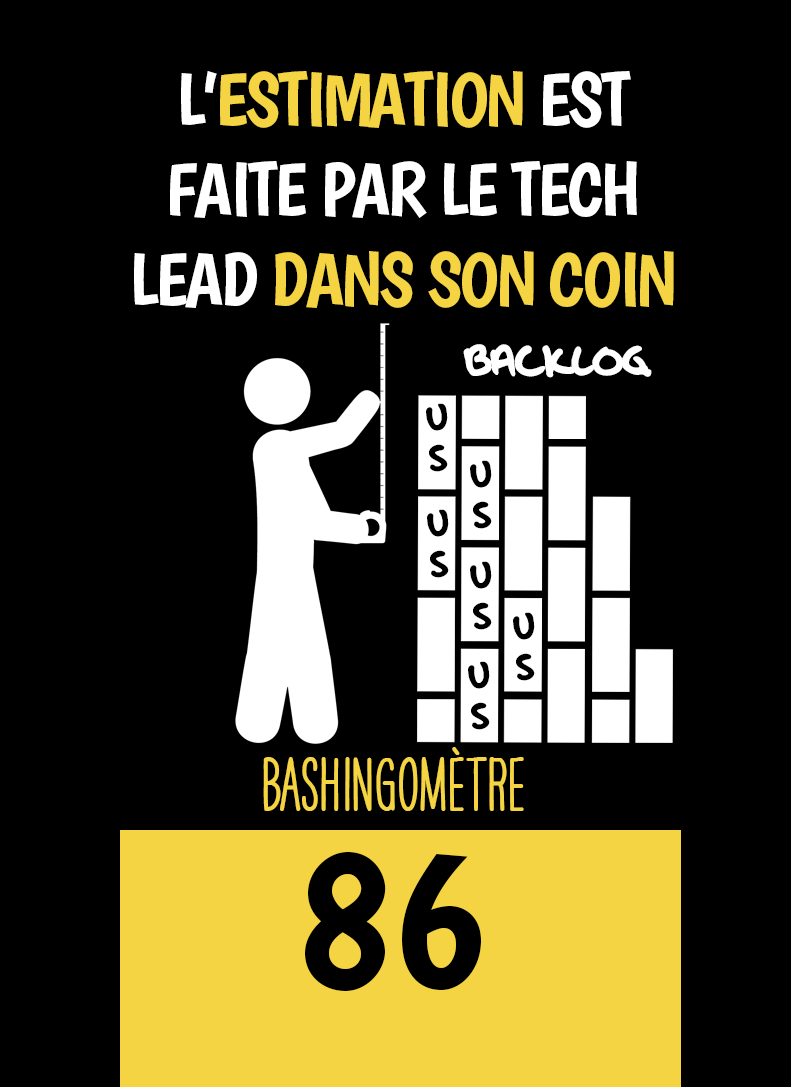
<style>
.page{position:relative;width:791px;height:1087px;background:#000000}
.page>*{position:absolute;margin:0}
.t1{font:75px "Boogaloo-Regular";letter-spacing:-0.04em;color:#ffffff}
.t2{font:75px "Boogaloo-Regular";letter-spacing:-0.04em;color:#f4d443}
.t3{font:50px "OakStreetW01-Regular";letter-spacing:-0.04em;color:#ffffff}
.t4{font:41.7px/40px "OakStreetW01-Regular";letter-spacing:-0.04em;color:#000000}
.t5{font:66.7px "HAVEANICEDAYTallW04-Bold";color:#f4d443}
.t6{font:200px "Boogaloo-Regular";color:#000000}
</style>
<div class="page">
<p class="t1" style="left:134px;top:71px;width:540px;height:237px;text-align:center">L’<span class="t2">ESTIMATION</span> EST FAITE PAR LE TECH LEAD <span class="t2">DANS SON COIN</span></p>
<p class="t3" style="left:463px;top:344px;width:189px;height:34px">BACKLOG</p>
<p class="t4" style="left:426px;top:403px;width:22px;height:69px;text-align:center">U<br>S</p>
<p class="t4" style="left:470px;top:460px;width:22px;height:69px;text-align:center">U<br>S</p>
<p class="t4" style="left:427px;top:509px;width:22px;height:69px;text-align:center">U<br>S</p>
<p class="t4" style="left:470px;top:561px;width:22px;height:69px;text-align:center">U<br>S</p>
<p class="t4" style="left:513px;top:612px;width:22px;height:69px;text-align:center">U<br>S</p>
<p class="t4" style="left:468px;top:661px;width:22px;height:69px;text-align:center">U<br>S</p>
<p class="t5" style="left:263px;top:747px;width:261px;height:64px">BASHINgomètre</p>
<p class="t6" style="left:305px;top:852px;width:176px;height:139px">86</p>
</div>
